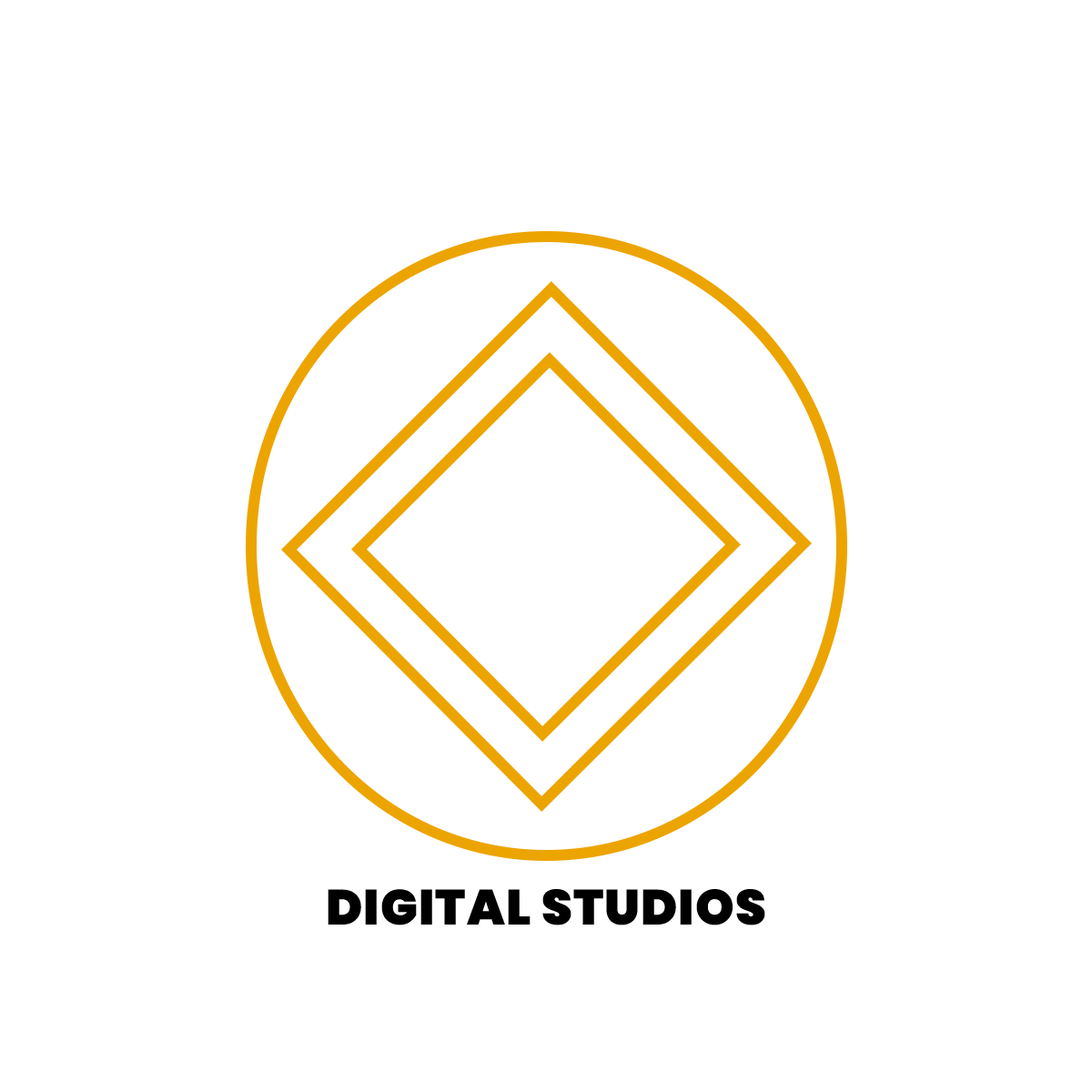
<style>
.page{position:relative;width:1092px;height:1092px;background:#ffffff}
.page>*{position:absolute;margin:0}
.t1{font:49.3px "Poppins-Black";letter-spacing:0.02em;color:#000000}
</style>
<div class="page">
<p class="t1" style="left:328px;top:889px;width:437px;height:36px">DIGITAL STUDIOS</p>
</div>
